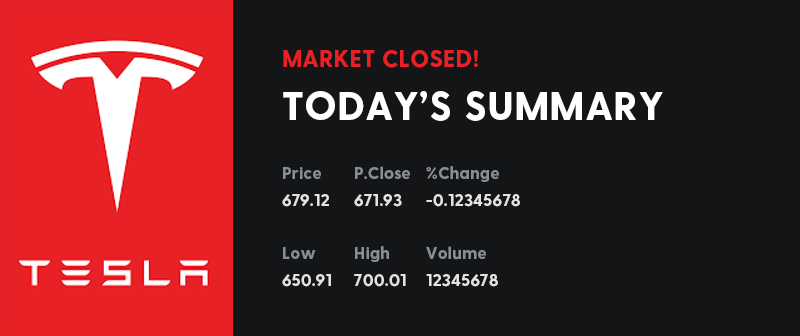
<style>
.page{position:relative;width:800px;height:336px;background:#141516}
.page>*{position:absolute;margin:0}
.t1{font:23.3px "GreycliffCF-ExtraBold";color:#e82127;text-transform:uppercase}
.t2{font:40px "GreycliffCF-ExtraBold";color:#ffffff;text-transform:uppercase}
.t3{font:16.7px "GreycliffCF-ExtraBold";color:#8a8d91}
.t4{font:16.7px "GreycliffCF-ExtraBold";color:#e2e2e2}
</style>
<div class="page">
<p class="t1" style="left:283px;top:50px;width:195px;height:18px">market closed!</p>
<p class="t2" style="left:283px;top:91px;width:380px;height:30px">TODAY’s summary</p>
<p class="t3" style="left:283px;top:166px;width:216px;height:96px">Price P.Close %Change <br><br><br><br>Low  High Volume</p>
<p class="t4" style="left:282px;top:194px;width:238px;height:93px">679.12 671.93 -0.12345678<br><br><br><br>650.91 700.01 12345678</p>
</div>
